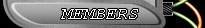
<style>
.page{position:relative;width:205px;height:28px}
.page>*{position:absolute;margin:0}
.t1{font:18px "CourierNewPS-ItalicMT";color:#ffffff}
</style>
<div class="page">
<p class="t1" style="left:61px;top:9px;width:77px;height:10px">MEMBERS</p>
</div>
